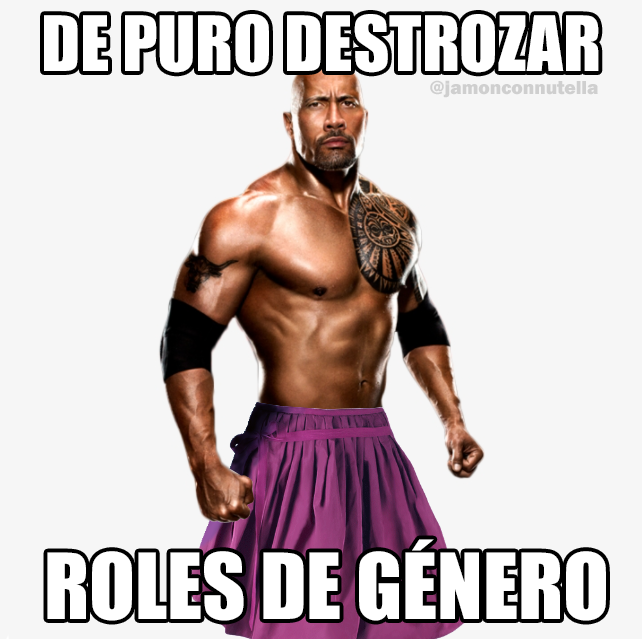
<style>
.page{position:relative;width:642px;height:639px;background:#f6f6f6}
.page>*{position:absolute;margin:0}
.t1{font:70.5px "Impact";color:#ffffff}
.t2{font:19.4px "FranklinGothic-Heavy";color:#cfcfcf}
.t3{font:84px "Impact";color:#ffffff}
</style>
<div class="page">
<p class="t1" style="left:44px;top:14px;width:555px;height:59px">DE PURO DESTROZAR</p>
<p class="t2" style="left:430px;top:80px;width:168px;height:18px">@jamonconnutella</p>
<p class="t3" style="left:47px;top:539px;width:559px;height:82px">ROLES DE GÉNERO</p>
</div>
